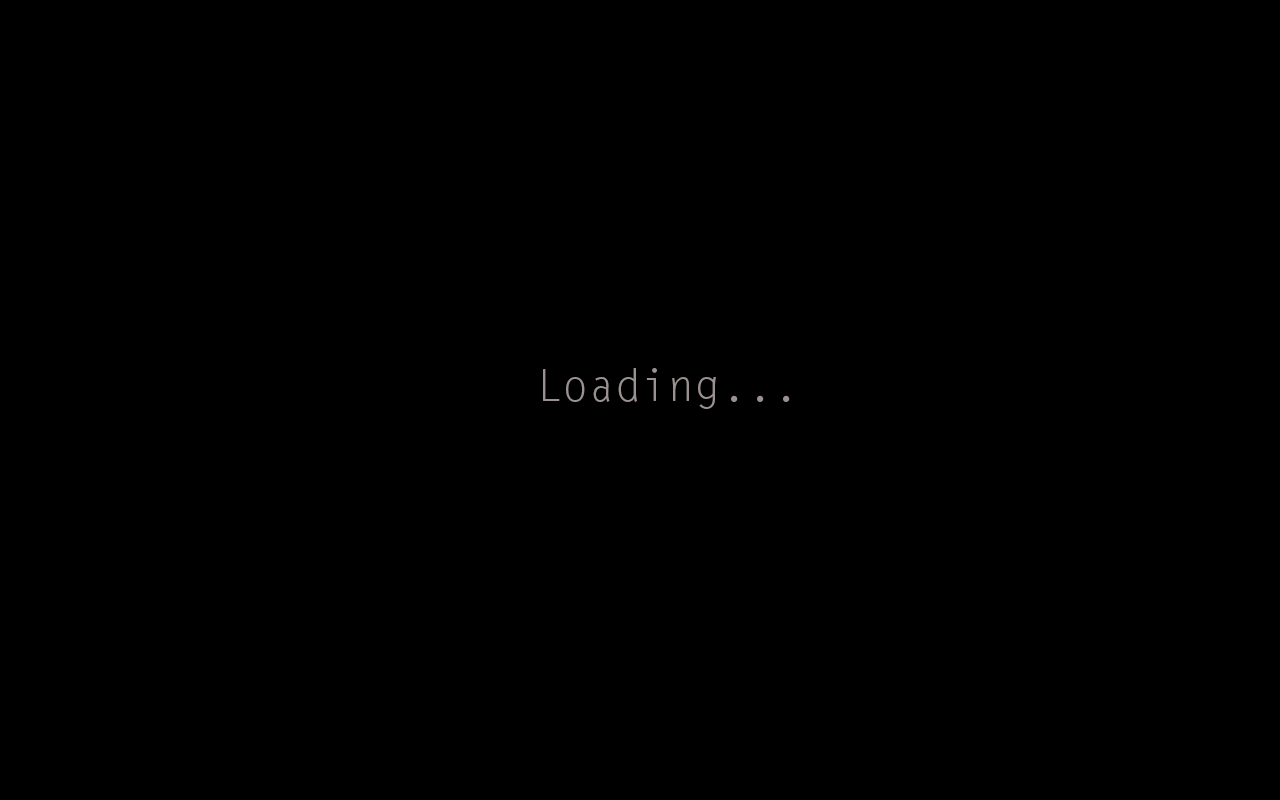
<style>
.page{position:relative;width:1280px;height:800px;background:#000000}
.page>*{position:absolute;margin:0}
.t1{font:44px "LetterGothicStd";color:#9b9191}
</style>
<div class="page">
<p class="t1" style="left:543px;top:368px;width:247px;height:41px">Loading...</p>
</div>
